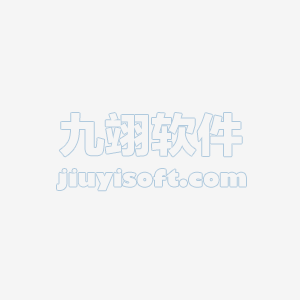
<style>
.page{position:relative;width:300px;height:300px;background:#f5f5f5}
.page>*{position:absolute;margin:0}
.t1{font:46.2px "FZLTTHK--GBK1-0";letter-spacing:-0.005em;color:#f5f5f5}
.t2{font:23.1px "GillSans-UltraBold";letter-spacing:-0.005em;color:#f5f5f5}
</style>
<div class="page">
<p class="t1" style="left:59px;top:113px;width:183px;height:44px">九翊软件</p>
<p class="t2" style="left:57px;top:169px;width:189px;height:22px">jiuyisoft.com</p>
</div>
